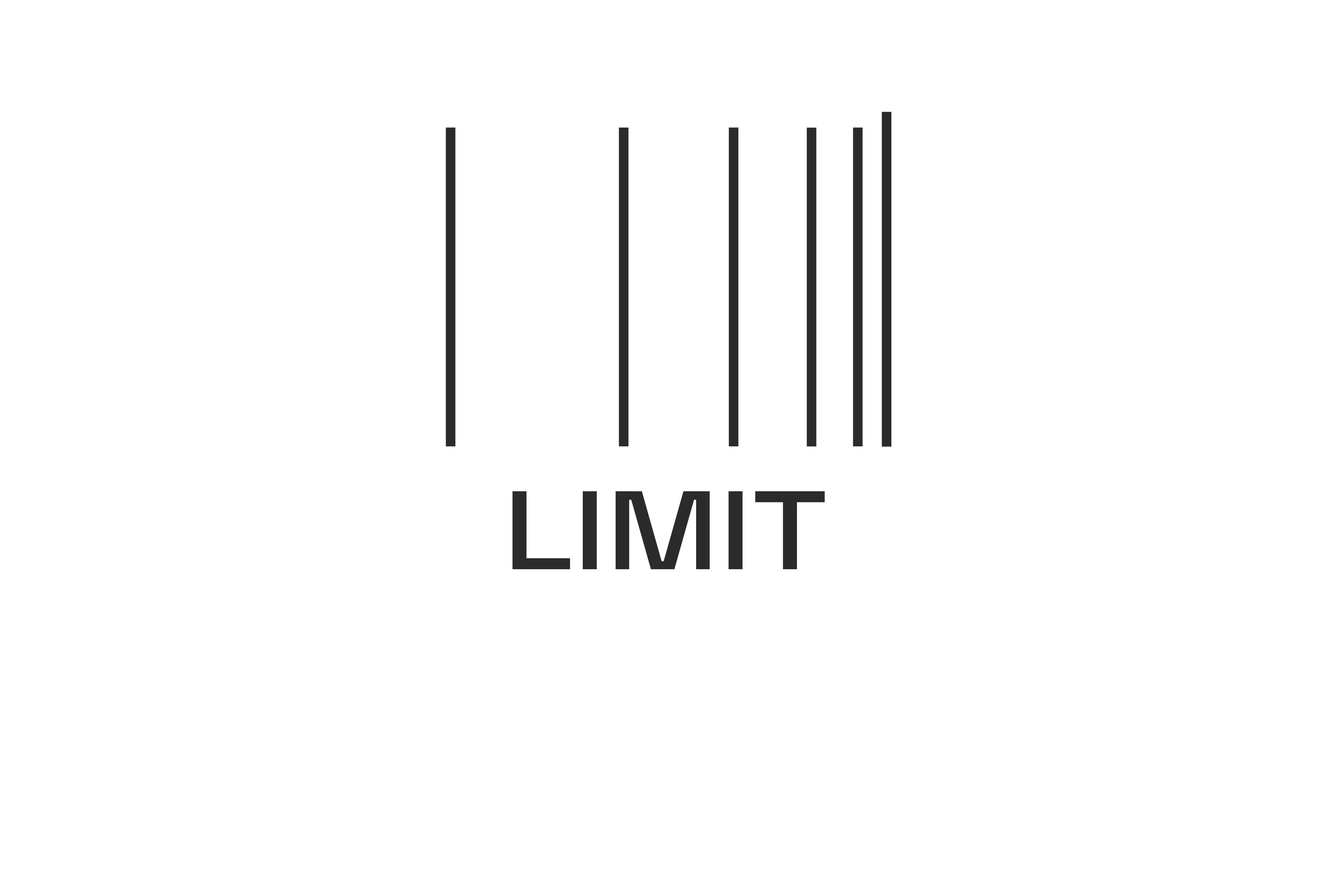
<style>
.page{position:relative;width:1337px;height:892px;background:#ffffff}
.page>*{position:absolute;margin:0}
.t1{font:111.3px "SpaceGroteskLight-Medium";color:#2b2b2b;scale:1.16 1}
</style>
<div class="page">
<p class="t1" style="left:512px;top:491px;width:313px;height:78px">LIMIT</p>
</div>
